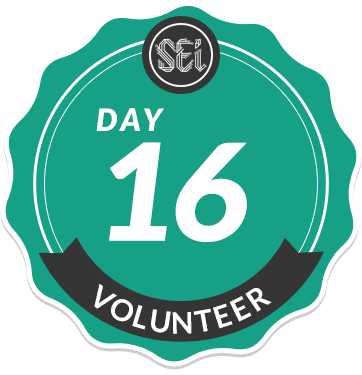
<style>
.page{position:relative;width:362px;height:375px;background:#16a085}
.page>*{position:absolute;margin:0}
.t1{font:30.6px/110px "Lato-BlackItalic";letter-spacing:0.14em;color:#ffffff}
.t2{font:134.6px/110px "Lato-BlackItalic";letter-spacing:-0.02em;color:#ffffff}
.t3{font:29.7px/66.3px "Lato-Bold";letter-spacing:0.1em;color:#ffffff}
</style>
<div class="page">
<p class="t1" style="left:96px;top:108px;width:151px;height:134px">DAY<br><span class="t2">16</span></p>
<p class="t3" style="left:94px;top:283px;width:178px;height:51px;text-align:center">VOLUNTEER</p>
</div>
